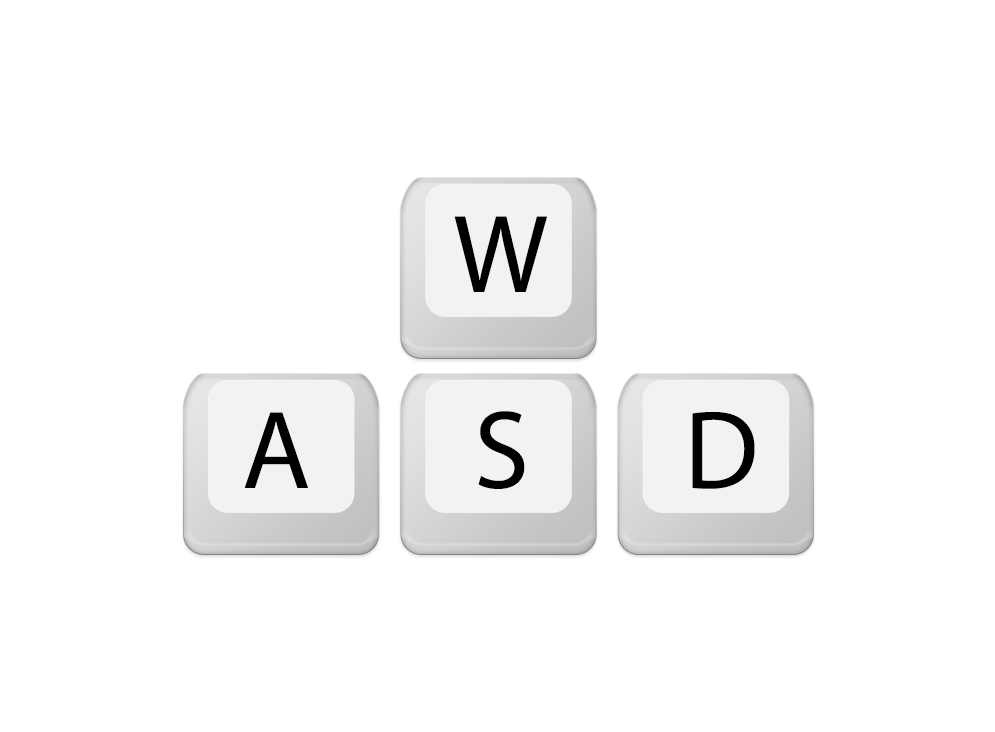
<style>
.page{position:relative;width:995px;height:732px;background:#ffffff}
.page>*{position:absolute;margin:0}
.t1{font:112px "MyriadPro-Regular";color:#000000}
</style>
<div class="page">
<p class="t1" style="left:454px;top:216px;width:93px;height:76px">W</p>
<p class="t1" style="left:244px;top:412px;width:64px;height:76px">A</p>
<p class="t1" style="left:478px;top:411px;width:47px;height:78px">S</p>
<p class="t1" style="left:692px;top:412px;width:63px;height:77px">D</p>
</div>
